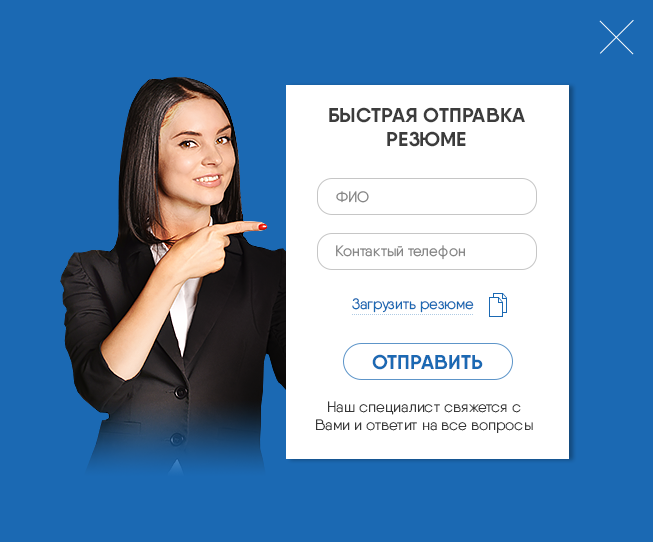
<style>
.page{position:relative;width:653px;height:542px;background:#1b69b3}
.page>*{position:absolute;margin:0}
.t1{font:20px "Qanelas-Bold";color:#3c3c3c;text-transform:uppercase}
.t2{font:15px "Qanelas-Regular";color:#868686;text-transform:uppercase}
.t3{font:15px "Qanelas-Regular";color:#868686}
.t4{font:15px "Qanelas-Regular";color:#1b69b3}
.t5{font:20px "Qanelas-Bold";color:#1b69b3}
.t6{font:15px "Qanelas-Light";color:#373737}
</style>
<div class="page">
<p class="t1" style="left:329px;top:107px;width:196px;height:40px;text-align:center">Быстрая отправка<br>резюме</p>
<p class="t2" style="left:336px;top:191px;width:33px;height:12px">Фио</p>
<p class="t3" style="left:336px;top:245px;width:129px;height:15px">Контактый телефон</p>
<p class="t4" style="left:352px;top:298px;width:122px;height:15px">Загрузить резюме</p>
<p class="t5" style="left:372px;top:354px;width:111px;height:16px">ОТПРАВИТЬ</p>
<p class="t6" style="left:316px;top:401px;width:217px;height:32px;text-align:center">Наш специалист свяжется с Вами и ответит на все вопросы</p>
</div>
